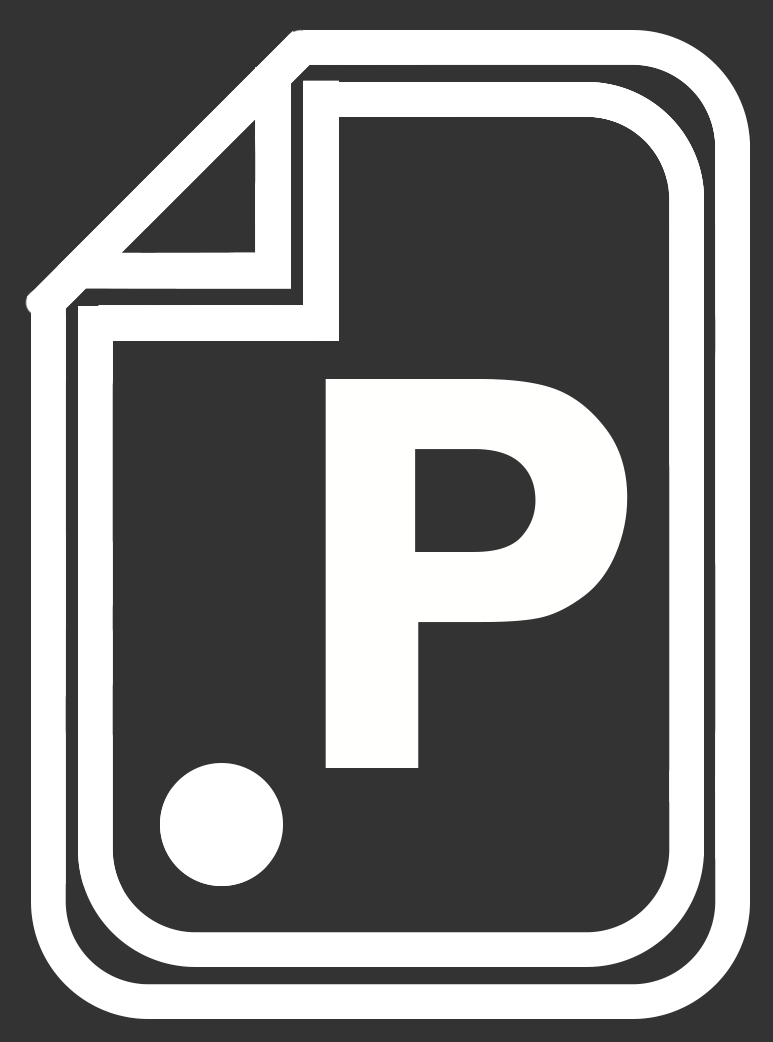
<style>
.page{position:relative;width:773px;height:1042px;background:#333333}
.page>*{position:absolute;margin:0}
.t1{font:583.3px "FranklinGothic-Demi";color:#fffffe}
</style>
<div class="page">
<p class="t1" style="left:325px;top:379px;width:303px;height:389px">P</p>
</div>
